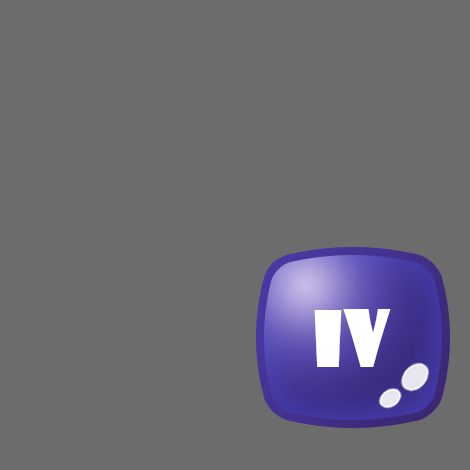
<style>
.page{position:relative;width:470px;height:470px;background:#6c6c6c}
.page>*{position:absolute;margin:0}
.t1{font:76.2px "ShowcardGothic-Reg";color:#ffffff;scale:1.04 1}
.t2{font:76.9px "ShowcardGothic-Reg";color:#ffffff;scale:0.95 1}
</style>
<div class="page">
<p class="t1" style="left:314px;top:310px;width:28px;height:57px">I</p>
<p class="t2" style="left:343px;top:309px;width:48px;height:58px">V</p>
</div>
